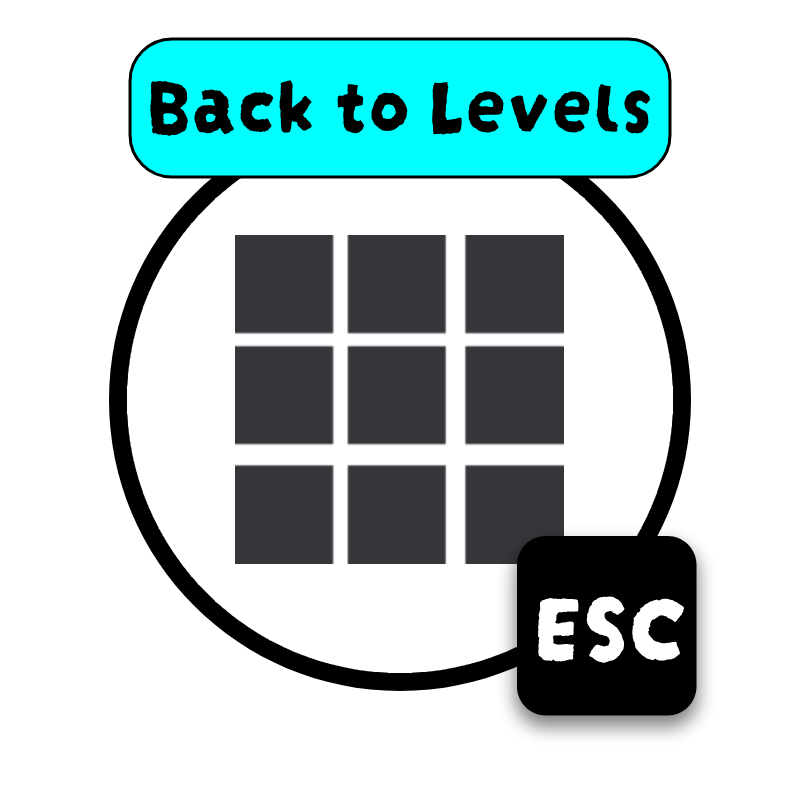
<style>
.page{position:relative;width:800px;height:800px;background:#ffffff}
.page>*{position:absolute;margin:0}
.t1{font:81px "DarumadropOne-Regular";color:#000000}
.t2{font:100px "DarumadropOne-Regular";color:#ffffff}
</style>
<div class="page">
<p class="t1" style="left:150px;top:80px;width:500px;height:56px">Back to Levels</p>
<p class="t2" style="left:538px;top:596px;width:146px;height:67px">ESC</p>
</div>
